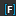
<style>
.page{position:relative;width:16px;height:16px;background:#333333}
.page>*{position:absolute;margin:0}
.t1{font:11px "Consolas";color:#ffffff}
</style>
<div class="page">
<p class="t1" style="left:7px;top:6px;width:6px;height:7px">F</p>
</div>
